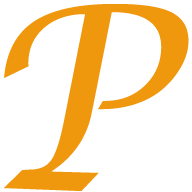
<style>
.page{position:relative;width:192px;height:192px;background:#ffffff}
.page>*{position:absolute;margin:0}
.t1{font:254px "LucidaCalligraphy-Italic";letter-spacing:0.05em;color:#ef970d}
</style>
<div class="page">
<p class="t1" style="left:4px;top:4px;width:185px;height:187px">P</p>
</div>
